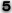
<style>
.page{position:relative;width:12px;height:13px}
.page>*{position:absolute;margin:0}
.t1{font:13.9px "K2D-ExtraBold";color:#000000}
</style>
<div class="page">
<p class="t1" style="left:2px;top:1px;width:9px;height:11px">5</p>
</div>
